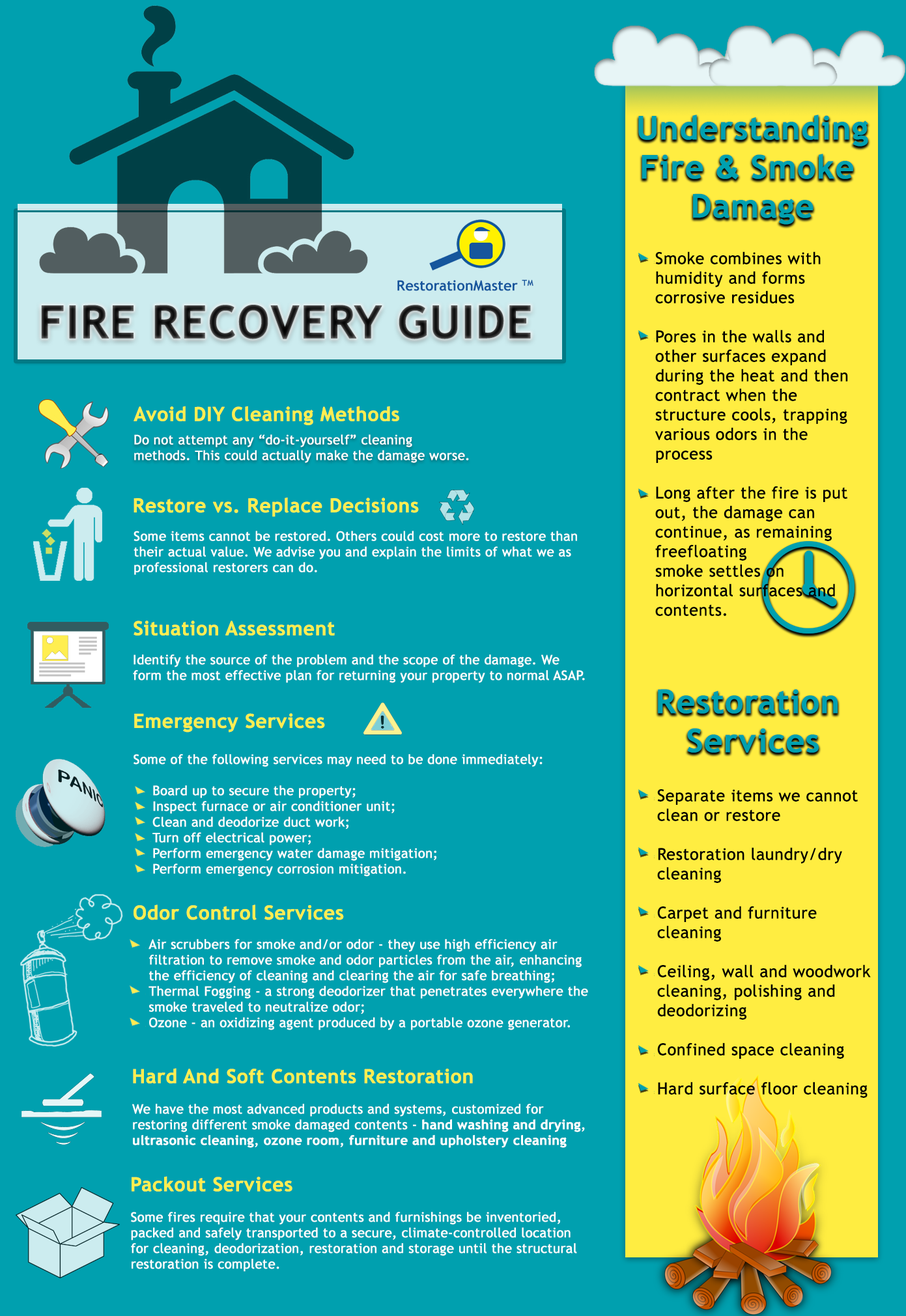
<style>
.page{position:relative;width:906px;height:1316px;background:#00a0af}
.page>*{position:absolute;margin:0}
.t1{font:32.6px "TrebuchetMS-Bold";letter-spacing:0.002em;color:#00a0af;font-weight:bold}
.t2{font:32.6px "Arial-BoldMT";letter-spacing:0.002em;color:#00a0af;font-weight:bold}
.t3{font:16.3px "TrebuchetMS";letter-spacing:0.002em;color:#000000;font-weight:bold}
.t4{font:14.3px "TrebuchetMS-Bold";color:#16569d}
.t5{font:45.6px "TrebuchetMS-Bold";letter-spacing:0.002em;font-weight:bold}
.t6{font:19.5px "TrebuchetMS-Bold";letter-spacing:0.002em;color:#ffee50;font-weight:bold}
.t7{font:13px "TrebuchetMS";letter-spacing:0.002em;color:#ffffff;font-weight:bold}
.t8{font:13px "TrebuchetMS-Bold";letter-spacing:0.002em;color:#ffffff;font-weight:bold}
</style>
<div class="page">
<p class="t1" style="left:638px;top:115px;width:230px;height:110px;text-align:center">Understanding<br>Fire <span class="t2">&amp;</span> Smoke <br>Damage</p>
<p class="t3" style="left:655px;top:251px;width:193px;height:365px">Smoke combines with humidity and forms corrosive residues<br><br>Pores in the walls and other surfaces expand during the heat and then contract when the structure cools, trapping various odors in the process<br><br>Long after the fire is put out, the damage can continue, as remaining freefloating<br>smoke settles on horizontal surfaces and contents.</p>
<p class="t4" style="left:397px;top:279px;width:136px;height:12px">RestorationMaster TM</p>
<p class="t5" style="left:41px;top:305px;width:490px;height:34px">FIRE RECOVERY GUIDE</p>
<p class="t6" style="left:134px;top:406px;width:265px;height:19px">Avoid DIY Cleaning Methods</p>
<p class="t7" style="left:134px;top:434px;width:335px;height:29px">Do not attempt any “do-it-yourself” cleaning<br>methods. This could actually make the damage worse.</p>
<p class="t6" style="left:134px;top:498px;width:285px;height:19px">Restore vs. Replace Decisions</p>
<p class="t7" style="left:134px;top:531px;width:443px;height:44px">Some items cannot be restored. Others could cost more to restore than their actual value. We advise you and explain the limits of what we as professional restorers can do.</p>
<p class="t6" style="left:134px;top:621px;width:201px;height:15px">Situation Assessment</p>
<p class="t7" style="left:133px;top:655px;width:452px;height:28px">Identify the source of the problem and the scope of the damage. We form the most effective plan for returning your property to normal ASAP.</p>
<p class="t1" style="left:658px;top:689px;width:180px;height:64px;text-align:center">Restoration <br>Services</p>
<p class="t6" style="left:134px;top:713px;width:191px;height:20px">Emergency Services</p>
<p class="t7" style="left:134px;top:754px;width:409px;height:123px">Some of the following services may need to be done immediately:<br><br>  Board up to secure the property;<br>  Inspect furnace or air conditioner unit;<br>  Clean and deodorize duct work;<br>  Turn off electrical power;<br>  Perform emergency water damage mitigation;<br>  Perform emergency corrosion mitigation.</p>
<p class="t3" style="left:657px;top:789px;width:214px;height:309px">Separate items we cannot clean or restore<br><br>Restoration laundry/dry cleaning<br><br>Carpet and furniture cleaning<br><br>Ceiling, wall and woodwork cleaning, polishing and deodorizing<br><br>Confined space cleaning<br><br>Hard surface floor cleaning</p>
<p class="t6" style="left:134px;top:905px;width:210px;height:15px">Odor Control Services</p>
<p class="t7" style="left:148px;top:939px;width:440px;height:91px">Air scrubbers for smoke and/or odor - they use high efficiency air filtration to remove smoke and odor particles from the air, enhancing the efficiency of cleaning and clearing the air for safe breathing;<br>Thermal Fogging - a strong deodorizer that penetrates everywhere the smoke traveled to neutralize odor;<br>Ozone - an oxidizing agent produced by a portable ozone generator.</p>
<p class="t6" style="left:133px;top:1068px;width:340px;height:16px">Hard And Soft Contents Restoration</p>
<p class="t7" style="left:132px;top:1104px;width:453px;height:44px">We have the most advanced products and systems, customized for restoring different smoke damaged contents - <span class="t8">hand washing and drying</span>, <span class="t8">ultrasonic cleaning</span>, <span class="t8">ozone room</span>, <span class="t8">furniture and upholstery cleaning</span></p>
<p class="t6" style="left:132px;top:1176px;width:160px;height:16px">Packout Services</p>
<p class="t7" style="left:131px;top:1212px;width:446px;height:60px">Some fires require that your contents and furnishings be inventoried, packed and safely transported to a secure, climate-controlled location for cleaning, deodorization, restoration and storage until the structural restoration is complete.</p>
</div>
